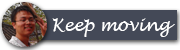
<style>
.page{position:relative;width:180px;height:50px;background:#444957}
.page>*{position:absolute;margin:0}
.t1{font:16.7px "LucidaHandwriting-Italic";color:#ffffff}
</style>
<div class="page">
<p class="t1" style="left:52px;top:18px;width:123px;height:19px">Keep moving</p>
</div>
